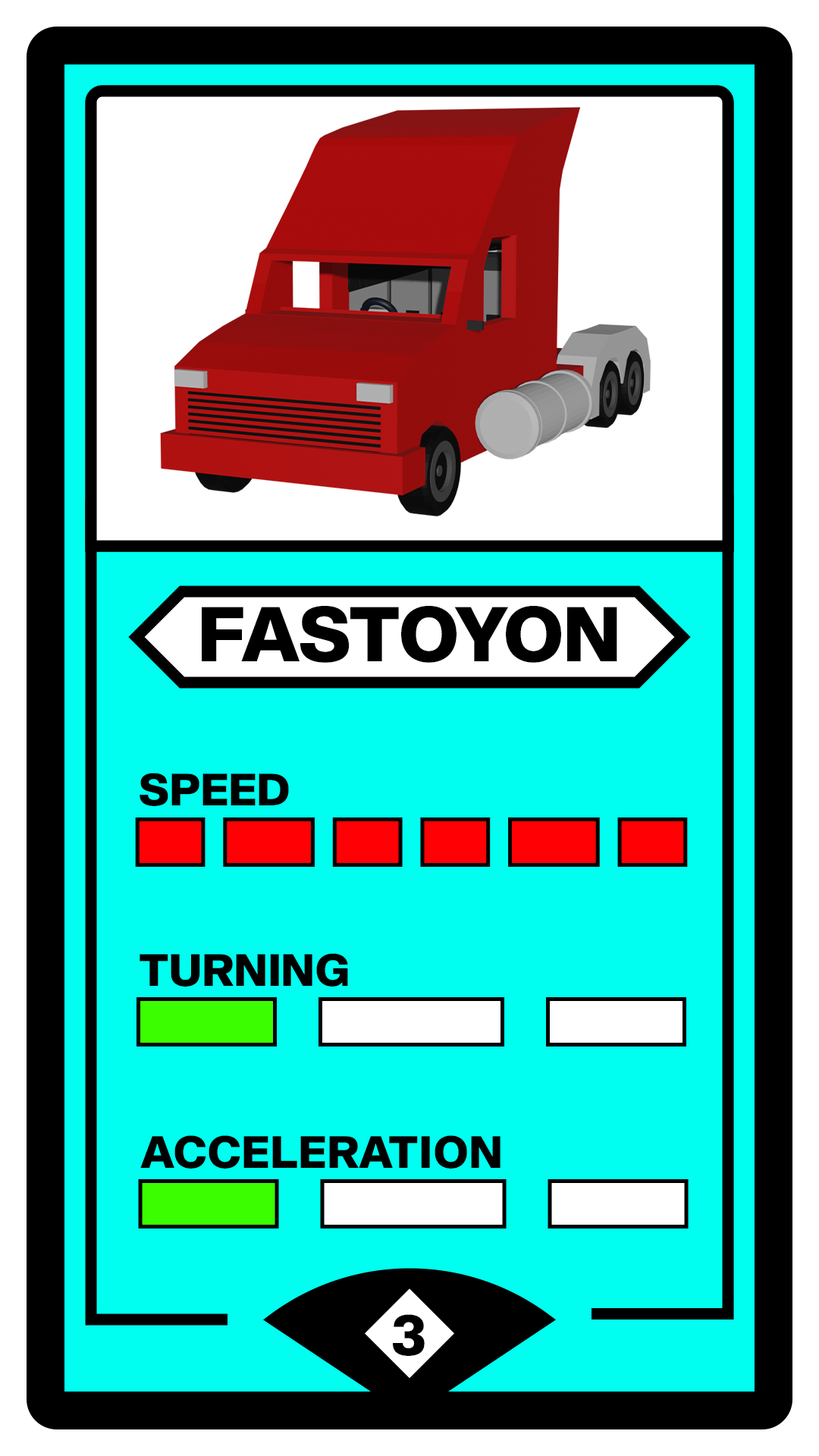
<style>
.page{position:relative;width:819px;height:1456px;background:#00fff0}
.page>*{position:absolute;margin:0}
.t1{font:75.8px "Shapiro-85SuperHeavy";letter-spacing:-0.01em;color:#000000}
.t2{font:44.2px "Shapiro-85SuperHeavy";letter-spacing:-0.01em;color:#000000}
.t3{font:44.2px "Shapiro-85SuperHeavy";letter-spacing:-0.01em;color:#000000;text-transform:uppercase}
.t4{font:56.9px "Shapiro-85SuperHeavy";letter-spacing:-0.01em;color:#000000}
</style>
<div class="page">
<p class="t1" style="left:202px;top:606px;width:415px;height:57px">FASTOYON</p>
<p class="t2" style="left:140px;top:773px;width:149px;height:33px">SPEED</p>
<p class="t2" style="left:140px;top:953px;width:208px;height:34px">TURNING</p>
<p class="t3" style="left:140px;top:1135px;width:360px;height:34px">acceleration</p>
<p class="t4" style="left:393px;top:1314px;width:32px;height:42px">3</p>
</div>
